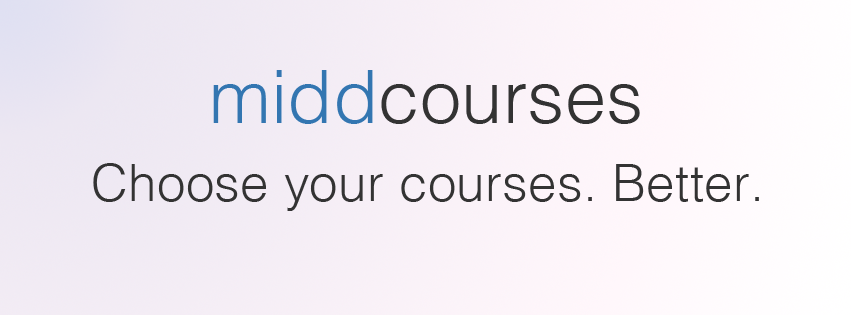
<style>
.page{position:relative;width:851px;height:315px}
.page>*{position:absolute;margin:0}
.t1{font:73.8px "Helvetica-Light";letter-spacing:0.005em;color:#333333}
.t2{font:73.8px "Helvetica-Light";letter-spacing:0.005em;color:#3376b1}
.t3{font:51.3px "Helvetica-Light";letter-spacing:0.005em;color:#333333}
</style>
<div class="page">
<p class="t1" style="left:213px;top:70px;width:427px;height:54px"><span class="t2">midd</span>courses</p>
<p class="t3" style="left:93px;top:163px;width:666px;height:48px">Choose your courses. Better.</p>
</div>
